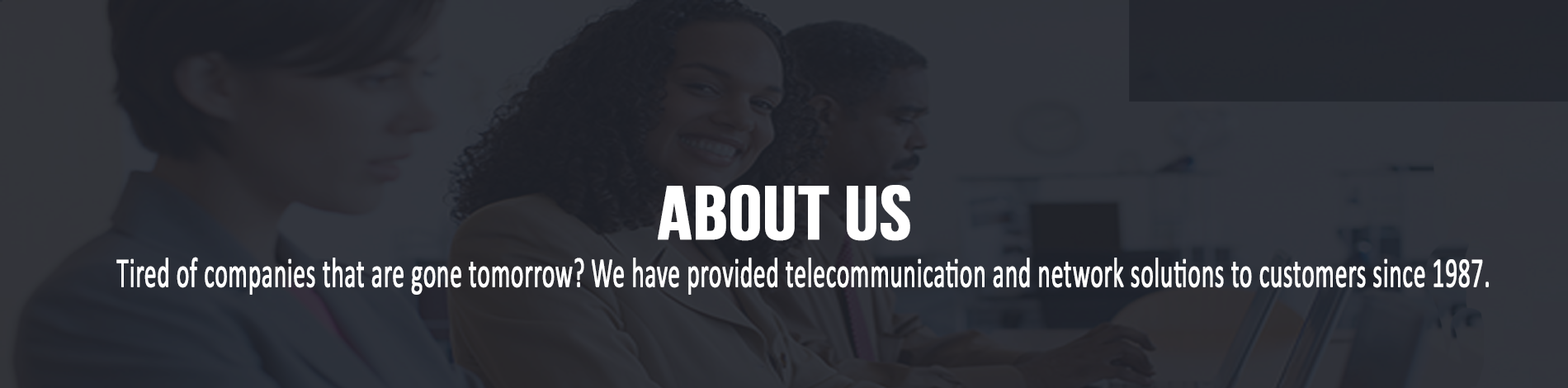
<style>
.page{position:relative;width:1568px;height:388px}
.page>*{position:absolute;margin:0}
.t1{font:75.4px "BebasNeue";color:#fefefe;font-weight:bold;scale:1.09 1}
.t2{font:42.4px "Calibri";color:#ffffff;font-weight:bold;scale:0.57 1}
</style>
<div class="page">
<p class="t1" style="left:658px;top:185px;width:252px;height:56px">ABOUT US</p>
<p class="t2" style="left:116px;top:257px;width:1373px;height:38px">Tired of companies that are gone tomorrow? We have provided telecommunication and network solutions to customers since 1987.</p>
</div>
